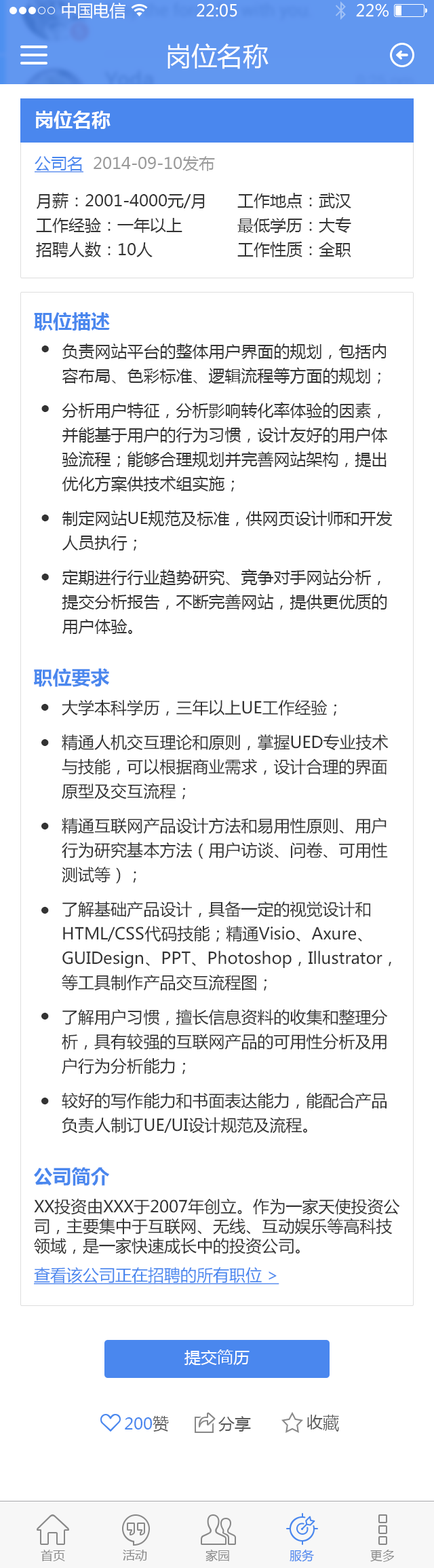
<style>
.page{position:relative;width:434px;height:1568px;background:#ffffff}
.page>*{position:absolute;margin:0}
.t1{font:16.3px "MicrosoftYaHei";color:#ffffff}
.t2{font:25.8px "MicrosoftYaHei";color:#ffffff}
.t3{font:19px "MicrosoftYaHei-Bold";color:#fefefe}
.t4{font:16.3px "MicrosoftYaHei";color:#999999}
.t5{font:16.3px "MicrosoftYaHei";color:#4a87ee;text-decoration:underline}
.t6{font:16.3px/24.4px "MicrosoftYaHei";color:#333333}
.t7{font:19px "MicrosoftYaHei-Bold";color:#4a87ee}
.t8{font:16.3px "MicrosoftYaHei";color:#333333}
.t9{font:16.3px "MicrosoftYaHei";color:#4a87ee}
.t10{font:16.3px "MicrosoftYaHei";color:#5a5a5a}
.t11{font:12.2px "MicrosoftYaHei";color:#888888}
.t12{font:12.2px "MicrosoftYaHei";color:#4a87ee}
</style>
<div class="page">
<p class="t1" style="left:62px;top:3px;width:64px;height:16px">中国电信</p>
<p class="t1" style="left:197px;top:3px;width:41px;height:14px">22:05</p>
<p class="t1" style="left:356px;top:3px;width:33px;height:14px">22%</p>
<p class="t2" style="left:168px;top:43px;width:101px;height:26px">岗位名称</p>
<p class="t3" style="left:36px;top:111px;width:75px;height:18px">岗位名称</p>
<p class="t4" style="left:35px;top:156px;width:180px;height:16px"><span class="t5">公司名</span>  2014-09-10发布</p>
<p class="t6" style="left:36px;top:193px;width:169px;height:64px">月薪：2001-4000元/月<br>工作经验：一年以上<br>招聘人数：10人</p>
<p class="t6" style="left:238px;top:193px;width:114px;height:64px">工作地点：武汉<br>最低学历：大专<br>工作性质：全职</p>
<p class="t7" style="left:34px;top:312px;width:76px;height:19px">职位描述</p>
<p class="t6" style="left:62px;top:343px;width:331px;height:291px">负责网站平台的整体用户界面的规划，包括内容布局、色彩标准、逻辑流程等方面的规划；<br>分析用户特征，分析影响转化率体验的因素，并能基于用户的行为习惯，设计友好的用户体验流程；能够合理规划并完善网站架构，提出优化方案供技术组实施；<br>制定网站UE规范及标准，供网页设计师和开发人员执行；<br>定期进行行业趋势研究、竞争对手网站分析，提交分析报告，不断完善网站，提供更优质的用户体验。</p>
<p class="t7" style="left:34px;top:668px;width:75px;height:19px">职位要求</p>
<p class="t6" style="left:62px;top:699px;width:330px;height:435px">大学本科学历，三年以上UE工作经验； <br>精通人机交互理论和原则，掌握UED专业技术与技能，可以根据商业需求，设计合理的界面原型及交互流程； <br>精通互联网产品设计方法和易用性原则、用户行为研究基本方法（用户访谈、问卷、可用性测试等）；<br>了解基础产品设计，具备一定的视觉设计和HTML/CSS代码技能；精通Visio、Axure、GUIDesign、PPT、Photoshop，Illustrator，等工具制作产品交互流程图； <br>了解用户习惯，擅长信息资料的收集和整理分析，具有较强的互联网产品的可用性分析及用户行为分析能力； <br>较好的写作能力和书面表达能力，能配合产品负责人制订UE/UI设计规范及流程。</p>
<p class="t7" style="left:34px;top:1167px;width:76px;height:19px">公司简介</p>
<p class="t8" style="left:34px;top:1198px;width:366px;height:56px">XX投资由XXX于2007年创立。作为一家天使投资公司，主要集中于互联网、无线、互动娱乐等高科技领域，是一家快速成长中的投资公司。</p>
<p class="t5" style="left:34px;top:1267px;width:246px;height:17px">查看该公司正在招聘的所有职位 &gt;</p>
<p class="t1" style="left:185px;top:1349px;width:65px;height:16px">提交简历</p>
<p class="t9" style="left:125px;top:1416px;width:44px;height:16px">200<span class="t10">赞</span></p>
<p class="t10" style="left:219px;top:1416px;width:32px;height:16px">分享</p>
<p class="t10" style="left:307px;top:1415px;width:32px;height:17px">收藏</p>
<p class="t11" style="left:41px;top:1550px;width:24px;height:11px">首页</p>
<p class="t11" style="left:123px;top:1550px;width:24px;height:11px">活动</p>
<p class="t11" style="left:206px;top:1549px;width:23px;height:13px">家园</p>
<p class="t12" style="left:290px;top:1549px;width:24px;height:13px">服务</p>
<p class="t11" style="left:371px;top:1550px;width:23px;height:12px">更多</p>
</div>
